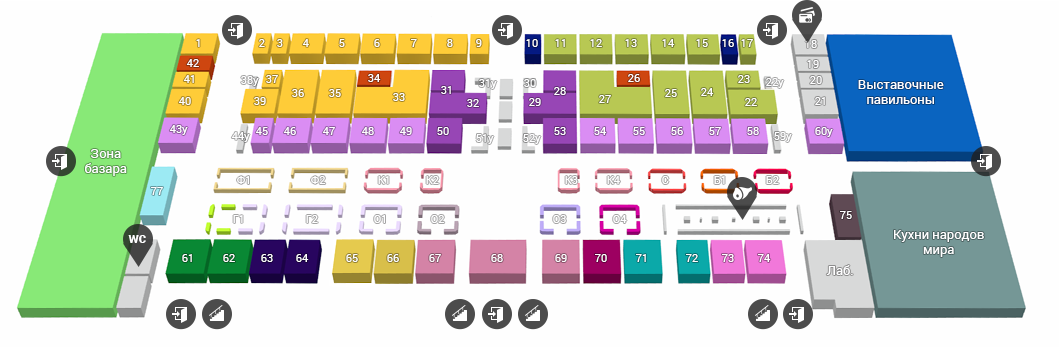
<style>
.page{position:relative;width:1059px;height:347px;background:#fefefe}
.page>*{position:absolute;margin:0}
.t1{font:11px "Roboto-Regular";color:#fefeff;text-transform:uppercase}
.t2{font:11px "Roboto-Regular";color:#fefeff}
.t3{font:13px/15px "Roboto-Regular";color:#fefeff}
.t4{font:14px "Roboto-Bold";color:#fefeff}
.t5{font:13px "Roboto-Regular";color:#fefeff}
</style>
<div class="page">
<p class="t1" style="left:196px;top:39px;width:4px;height:8px">1</p>
<p class="t1" style="left:259px;top:39px;width:6px;height:8px">2</p>
<p class="t1" style="left:277px;top:39px;width:6px;height:8px">3</p>
<p class="t1" style="left:302px;top:39px;width:7px;height:8px">4</p>
<p class="t1" style="left:339px;top:39px;width:6px;height:8px">5</p>
<p class="t1" style="left:374px;top:39px;width:6px;height:8px">6</p>
<p class="t1" style="left:411px;top:39px;width:6px;height:8px">7</p>
<p class="t1" style="left:447px;top:39px;width:6px;height:8px">8</p>
<p class="t1" style="left:476px;top:39px;width:6px;height:8px">9</p>
<p class="t1" style="left:526px;top:39px;width:12px;height:8px">10</p>
<p class="t1" style="left:555px;top:39px;width:10px;height:8px">11</p>
<p class="t1" style="left:590px;top:39px;width:12px;height:8px">12</p>
<p class="t1" style="left:625px;top:39px;width:12px;height:8px">13</p>
<p class="t1" style="left:662px;top:39px;width:13px;height:8px">14</p>
<p class="t1" style="left:696px;top:39px;width:12px;height:8px">15</p>
<p class="t1" style="left:722px;top:39px;width:12px;height:8px">16</p>
<p class="t1" style="left:741px;top:39px;width:12px;height:8px">17</p>
<p class="t1" style="left:805px;top:40px;width:12px;height:8px">18</p>
<p class="t1" style="left:186px;top:59px;width:13px;height:8px">42</p>
<p class="t1" style="left:807px;top:60px;width:12px;height:8px">19</p>
<p class="t1" style="left:183px;top:75px;width:11px;height:8px">41</p>
<p class="t2" style="left:241px;top:76px;width:18px;height:10px">38у</p>
<p class="t1" style="left:266px;top:75px;width:12px;height:8px">37</p>
<p class="t1" style="left:368px;top:74px;width:13px;height:8px">34</p>
<p class="t1" style="left:628px;top:74px;width:12px;height:8px">26</p>
<p class="t1" style="left:738px;top:75px;width:12px;height:8px">23</p>
<p class="t2" style="left:766px;top:78px;width:18px;height:10px">22у</p>
<p class="t1" style="left:810px;top:76px;width:12px;height:8px">20</p>
<p class="t1" style="left:292px;top:89px;width:12px;height:8px">36</p>
<p class="t1" style="left:329px;top:89px;width:12px;height:8px">35</p>
<p class="t1" style="left:441px;top:86px;width:10px;height:8px">31</p>
<p class="t2" style="left:479px;top:79px;width:18px;height:10px">31у</p>
<p class="t1" style="left:524px;top:79px;width:12px;height:8px">30</p>
<p class="t1" style="left:554px;top:87px;width:12px;height:8px">28</p>
<p class="t1" style="left:665px;top:89px;width:12px;height:8px">25</p>
<p class="t1" style="left:701px;top:88px;width:13px;height:8px">24</p>
<p class="t3" style="left:858px;top:80px;width:86px;height:24px;text-align:center">Выставочные<br>павильоны</p>
<p class="t1" style="left:178px;top:97px;width:13px;height:8px">40</p>
<p class="t1" style="left:254px;top:97px;width:12px;height:8px">39</p>
<p class="t1" style="left:393px;top:93px;width:12px;height:8px">33</p>
<p class="t1" style="left:467px;top:99px;width:12px;height:8px">32</p>
<p class="t1" style="left:529px;top:98px;width:12px;height:8px">29</p>
<p class="t1" style="left:599px;top:95px;width:12px;height:8px">27</p>
<p class="t1" style="left:745px;top:98px;width:12px;height:8px">22</p>
<p class="t1" style="left:815px;top:97px;width:10px;height:8px">21</p>
<p class="t2" style="left:169px;top:125px;width:19px;height:10px">43у</p>
<p class="t2" style="left:231px;top:132px;width:19px;height:10px">44у</p>
<p class="t1" style="left:255px;top:127px;width:13px;height:8px">45</p>
<p class="t1" style="left:283px;top:127px;width:13px;height:8px">46</p>
<p class="t1" style="left:322px;top:127px;width:13px;height:8px">47</p>
<p class="t1" style="left:361px;top:127px;width:13px;height:8px">48</p>
<p class="t1" style="left:399px;top:127px;width:13px;height:8px">49</p>
<p class="t1" style="left:437px;top:127px;width:12px;height:8px">50</p>
<p class="t2" style="left:476px;top:134px;width:18px;height:10px">51у</p>
<p class="t2" style="left:523px;top:134px;width:18px;height:10px">52у</p>
<p class="t2" style="left:554px;top:127px;width:12px;height:8px">53</p>
<p class="t1" style="left:594px;top:127px;width:13px;height:8px">54</p>
<p class="t1" style="left:633px;top:127px;width:12px;height:8px">55</p>
<p class="t1" style="left:671px;top:127px;width:12px;height:8px">56</p>
<p class="t1" style="left:709px;top:127px;width:12px;height:8px">57</p>
<p class="t1" style="left:747px;top:127px;width:12px;height:8px">58</p>
<p class="t2" style="left:774px;top:132px;width:18px;height:10px">59у</p>
<p class="t2" style="left:815px;top:127px;width:18px;height:10px">60у</p>
<p class="t3" style="left:85px;top:149px;width:42px;height:27px;text-align:center">Зона<br>базара</p>
<p class="t1" style="left:237px;top:176px;width:12px;height:8px">ф1</p>
<p class="t1" style="left:311px;top:176px;width:15px;height:8px">ф2</p>
<p class="t1" style="left:378px;top:176px;width:11px;height:8px">к1</p>
<p class="t1" style="left:426px;top:176px;width:13px;height:8px">к2</p>
<p class="t1" style="left:565px;top:176px;width:13px;height:8px">к3</p>
<p class="t1" style="left:607px;top:176px;width:13px;height:8px">к4</p>
<p class="t1" style="left:662px;top:176px;width:7px;height:8px">с</p>
<p class="t1" style="left:714px;top:176px;width:11px;height:8px">б1</p>
<p class="t1" style="left:766px;top:176px;width:13px;height:8px">б2</p>
<p class="t1" style="left:151px;top:187px;width:12px;height:8px">77</p>
<p class="t1" style="left:306px;top:215px;width:12px;height:8px">г2</p>
<p class="t1" style="left:374px;top:215px;width:11px;height:8px">о1</p>
<p class="t1" style="left:431px;top:215px;width:14px;height:8px">о2</p>
<p class="t1" style="left:553px;top:215px;width:13px;height:8px">о3</p>
<p class="t1" style="left:613px;top:215px;width:14px;height:8px">о4</p>
<p class="t1" style="left:840px;top:211px;width:12px;height:8px">75</p>
<p class="t3" style="left:894px;top:230px;width:90px;height:27px;text-align:center">Кухни народов<br>мира</p>
<p class="t4" style="left:128px;top:235px;width:18px;height:8px">wc</p>
<p class="t1" style="left:182px;top:254px;width:10px;height:8px">61</p>
<p class="t1" style="left:223px;top:254px;width:12px;height:8px">62</p>
<p class="t1" style="left:261px;top:254px;width:12px;height:8px">63</p>
<p class="t1" style="left:296px;top:254px;width:13px;height:8px">64</p>
<p class="t1" style="left:346px;top:254px;width:12px;height:8px">65</p>
<p class="t1" style="left:387px;top:254px;width:12px;height:8px">66</p>
<p class="t1" style="left:429px;top:254px;width:12px;height:8px">67</p>
<p class="t1" style="left:491px;top:254px;width:12px;height:8px">68</p>
<p class="t1" style="left:555px;top:254px;width:12px;height:8px">69</p>
<p class="t1" style="left:595px;top:254px;width:12px;height:8px">70</p>
<p class="t1" style="left:636px;top:254px;width:10px;height:8px">71</p>
<p class="t1" style="left:686px;top:254px;width:12px;height:8px">72</p>
<p class="t1" style="left:722px;top:254px;width:12px;height:8px">73</p>
<p class="t1" style="left:758px;top:254px;width:13px;height:8px">74</p>
<p class="t5" style="left:826px;top:265px;width:27px;height:10px">Лаб.</p>
</div>
